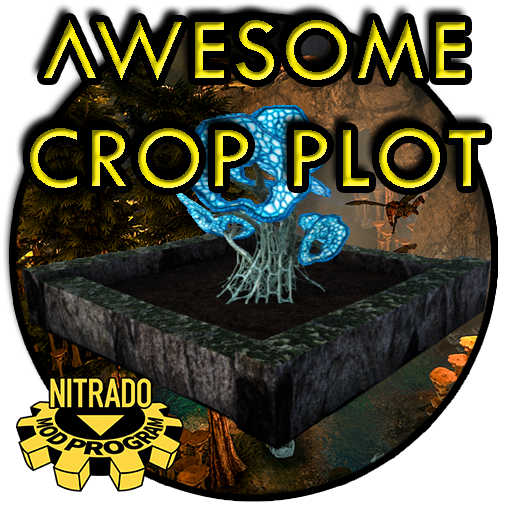
<style>
.page{position:relative;width:512px;height:512px}
.page>*{position:absolute;margin:0}
.t1{font:90px "ARK-Regular";letter-spacing:0.05em}
</style>
<div class="page">
<p class="t1" style="left:30px;top:20px;width:455px;height:168px;text-align:center">AWESOME CROP PLOT</p>
</div>
